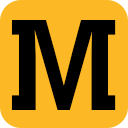
<style>
.page{position:relative;width:128px;height:128px;background:#fdb826}
.page>*{position:absolute;margin:0}
.t1{font:128px "CalvertMTStd-Bold";color:#000000}
</style>
<div class="page">
<p class="t1" style="left:11px;top:20px;width:105px;height:90px">M</p>
</div>
